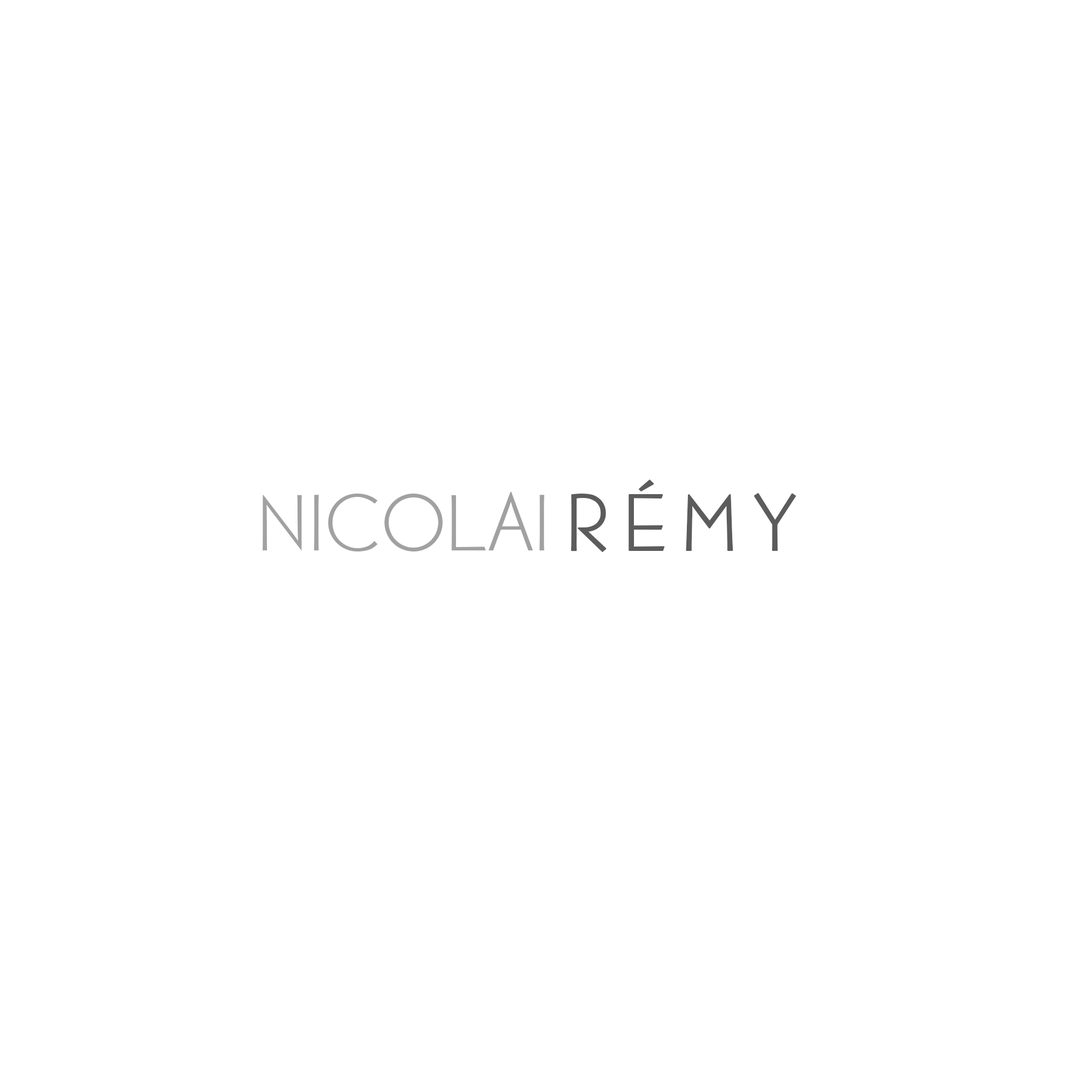
<style>
.page{position:relative;width:1092px;height:1092px;background:#ffffff}
.page>*{position:absolute;margin:0}
.t1{font:78.6px "BernhardGothicBQ-Light";letter-spacing:0.2em;color:#5c5c5c;font-weight:bold}
.t2{font:78.6px "BernhardGothicBQ-Light";color:#a1a1a1}
</style>
<div class="page">
<p class="t1" style="left:571px;top:479px;width:226px;height:74px">RÉMY</p>
<p class="t2" style="left:263px;top:491px;width:281px;height:60px">NICOLAI</p>
</div>
